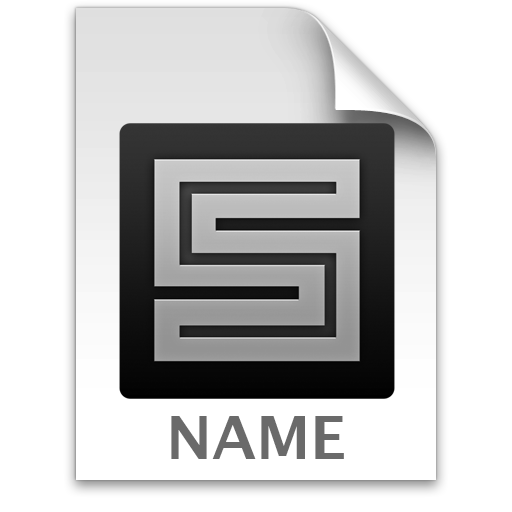
<style>
.page{position:relative;width:512px;height:512px;background:#ffffff}
.page>*{position:absolute;margin:0}
.t1{font:60px "LucidaGrande-Bold";color:#6a6a6a}
</style>
<div class="page">
<p class="t1" style="left:171px;top:416px;width:173px;height:43px">NAME</p>
</div>
